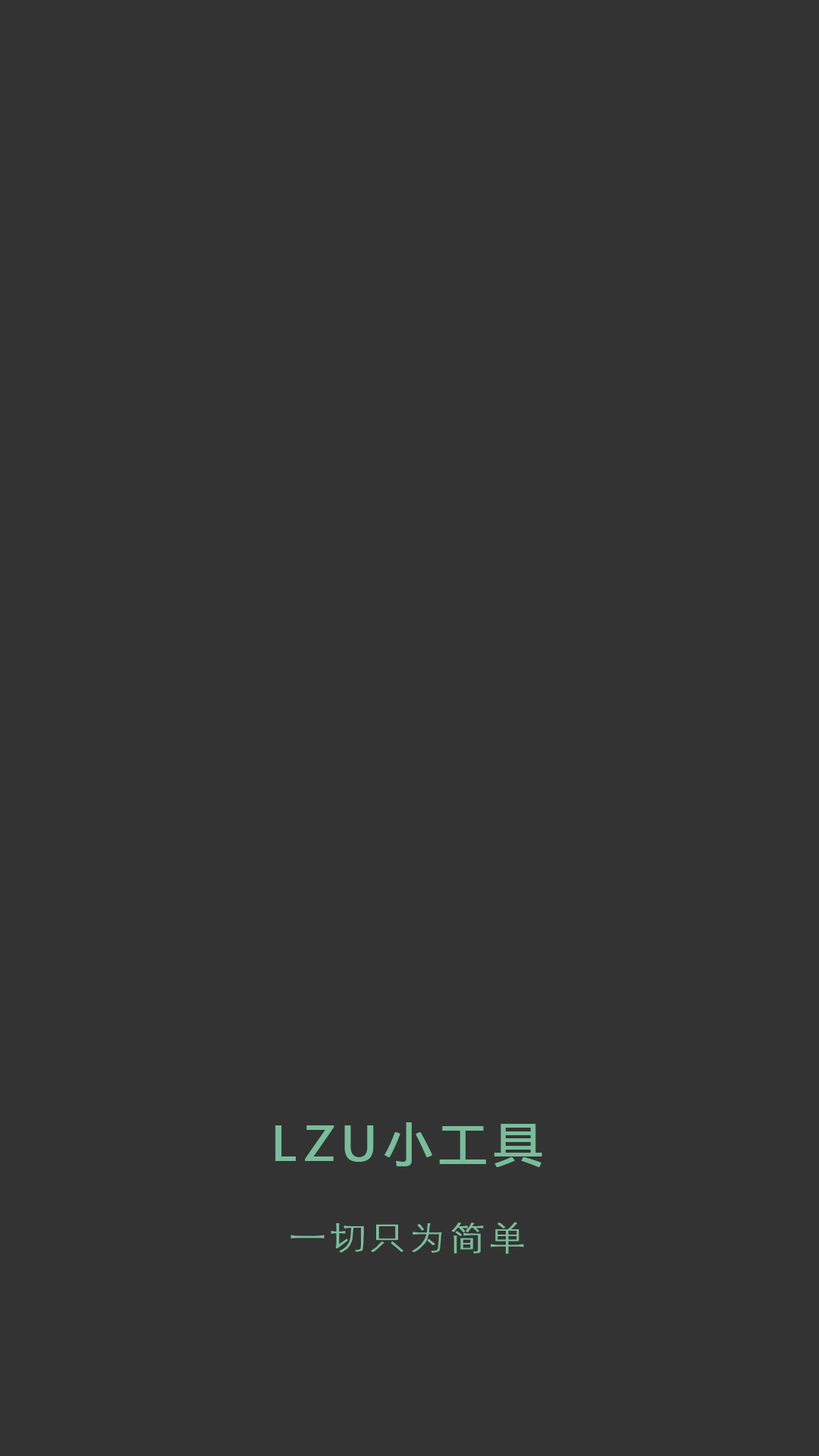
<style>
.page{position:relative;width:819px;height:1456px;background:#333333}
.page>*{position:absolute;margin:0}
.t1{font:46.2px "MicrosoftYaHei";letter-spacing:0.12em;color:#79bd9a;font-weight:bold;scale:1.04 1}
.t2{font:31.8px "FZXDXJW--GB1-0";letter-spacing:0.12em;color:#79bd9a;font-weight:bold;scale:1.09 1}
</style>
<div class="page">
<p class="t1" style="left:275px;top:1122px;width:267px;height:45px">LZU小工具</p>
<p class="t2" style="left:290px;top:1222px;width:234px;height:32px">一切只为简单</p>
</div>
